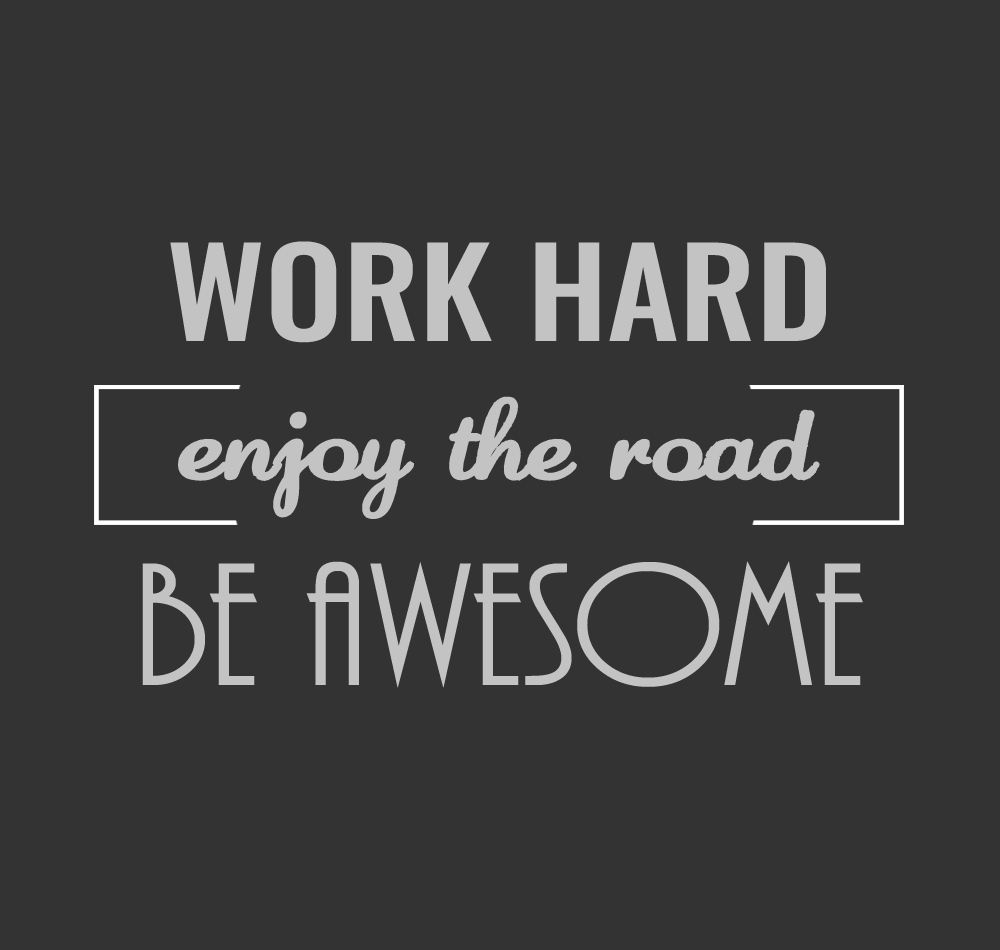
<style>
.page{position:relative;width:1000px;height:950px;background:#333333}
.page>*{position:absolute;margin:0}
.t1{font:121.6px "Oswald-Medium";color:#c3c3c3;font-variant:small-caps;scale:1.14 1}
.t2{font:109.4px "Diamond-Dust";color:#c3c3c3;font-weight:bold;scale:1.14 1}
.t3{font:182.3px "ARBONNIE";color:#c3c3c3;font-variant:small-caps;scale:1.14 1}
</style>
<div class="page">
<p class="t1" style="left:170px;top:241px;width:656px;height:102px">WORK HARD</p>
<p class="t2" style="left:178px;top:396px;width:642px;height:123px">enjoy the road</p>
<p class="t3" style="left:142px;top:561px;width:721px;height:127px">BE AWESOME</p>
</div>
